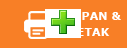
<style>
.page{position:relative;width:127px;height:48px;background:#f87f26}
.page>*{position:absolute;margin:0}
.t1{font:11px/16px "Verdana-Bold";letter-spacing:0.01em;color:#ffffff}
</style>
<div class="page">
<p class="t1" style="left:57px;top:12px;width:64px;height:24px;text-align:center">SIMPAN &amp;<br>CETAK</p>
</div>
